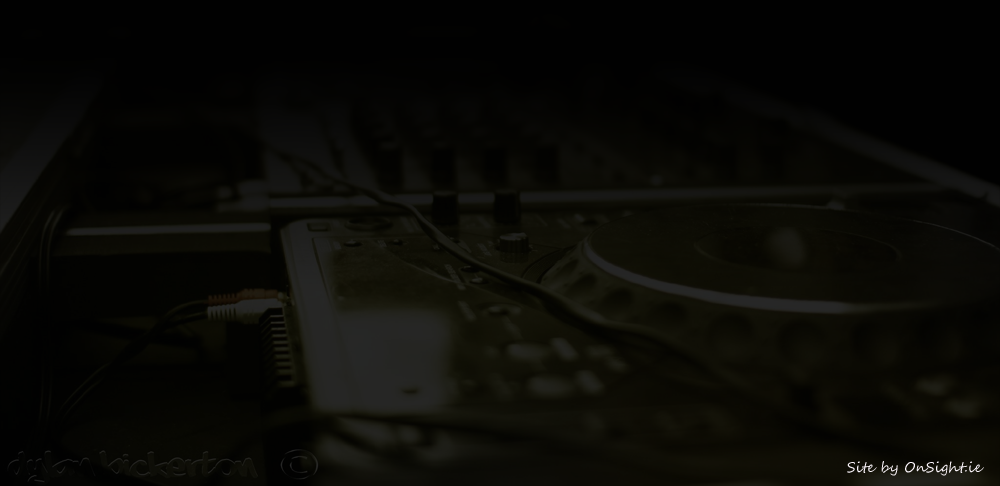
<style>
.page{position:relative;width:1000px;height:486px}
.page>*{position:absolute;margin:0}
.t1{font:14px "SegoeScript";color:#fcf6fc}
</style>
<div class="page">
<p class="t1" style="left:847px;top:461px;width:137px;height:15px">Site by OnSight.ie</p>
</div>
